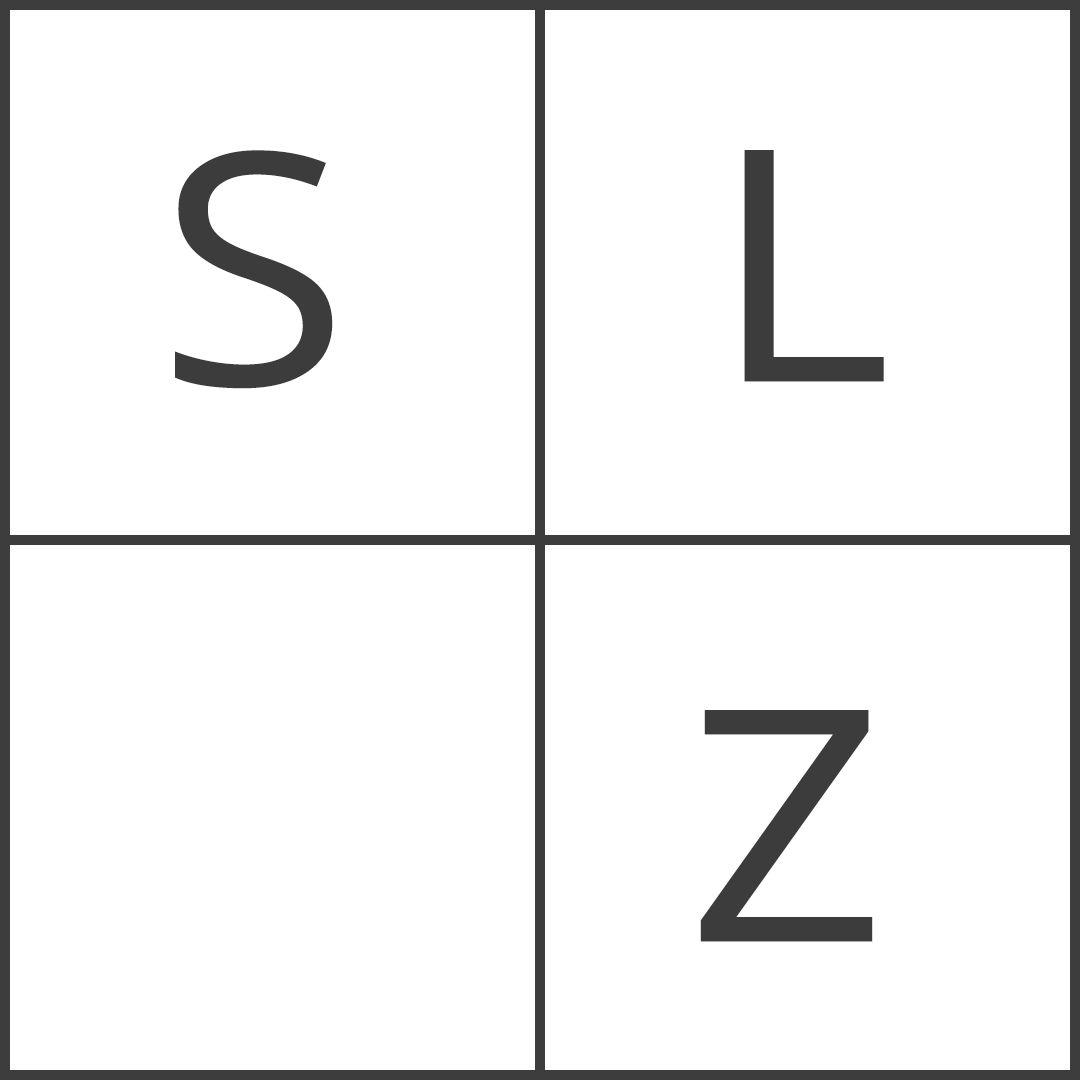
<style>
.page{position:relative;width:1080px;height:1080px;background:#ffffff}
.page>*{position:absolute;margin:0}
.t1{font:324px "OpenSans-Regular";letter-spacing:0.06em;color:#3c3c3c;scale:1.08 1}
</style>
<div class="page">
<p class="t1" style="left:175px;top:150px;width:158px;height:239px">S</p>
<p class="t1" style="left:744px;top:150px;width:140px;height:232px">L</p>
<p class="t1" style="left:700px;top:710px;width:173px;height:232px">Z</p>
</div>
